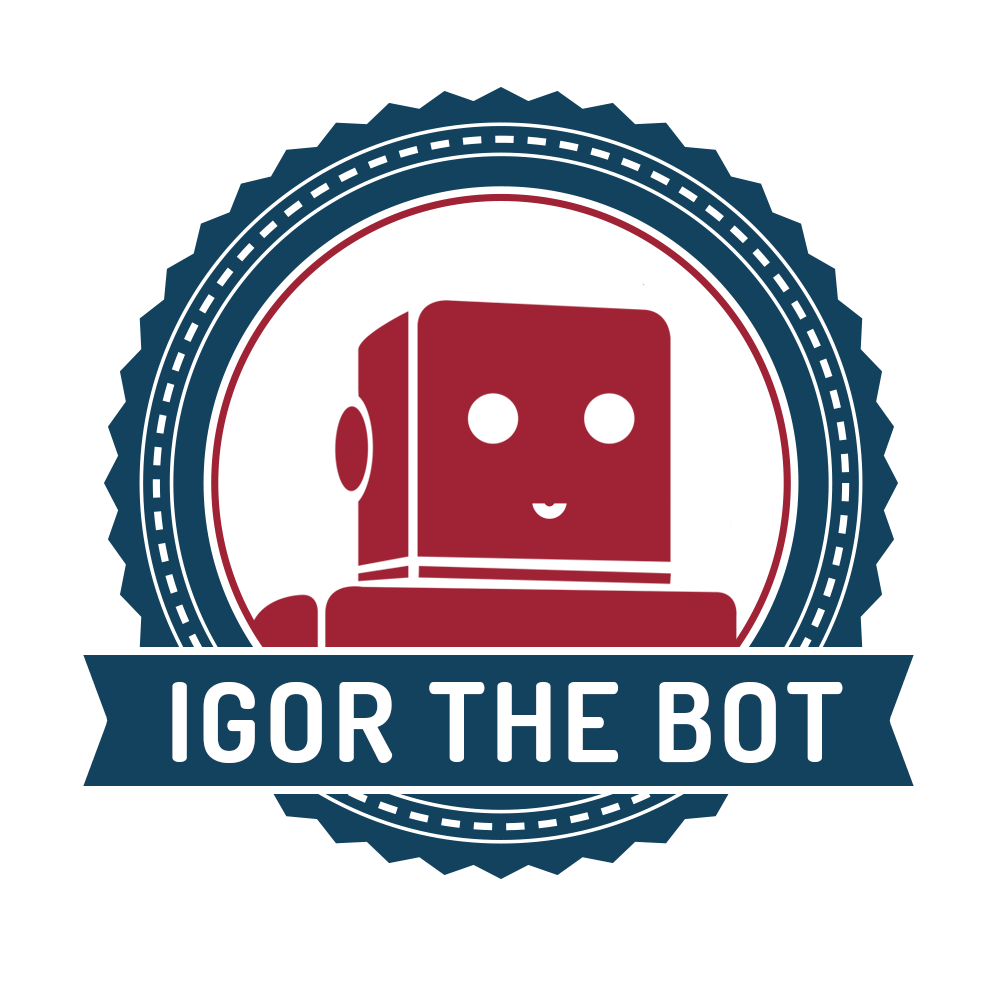
<style>
.page{position:relative;width:1000px;height:1000px;background:#ffffff}
.page>*{position:absolute;margin:0}
.t1{font:109px "Dosis-Bold";letter-spacing:0.05em;color:#ffffff}
</style>
<div class="page">
<p class="t1" style="left:172px;top:682px;width:671px;height:81px">IGOR THE BOT</p>
</div>
